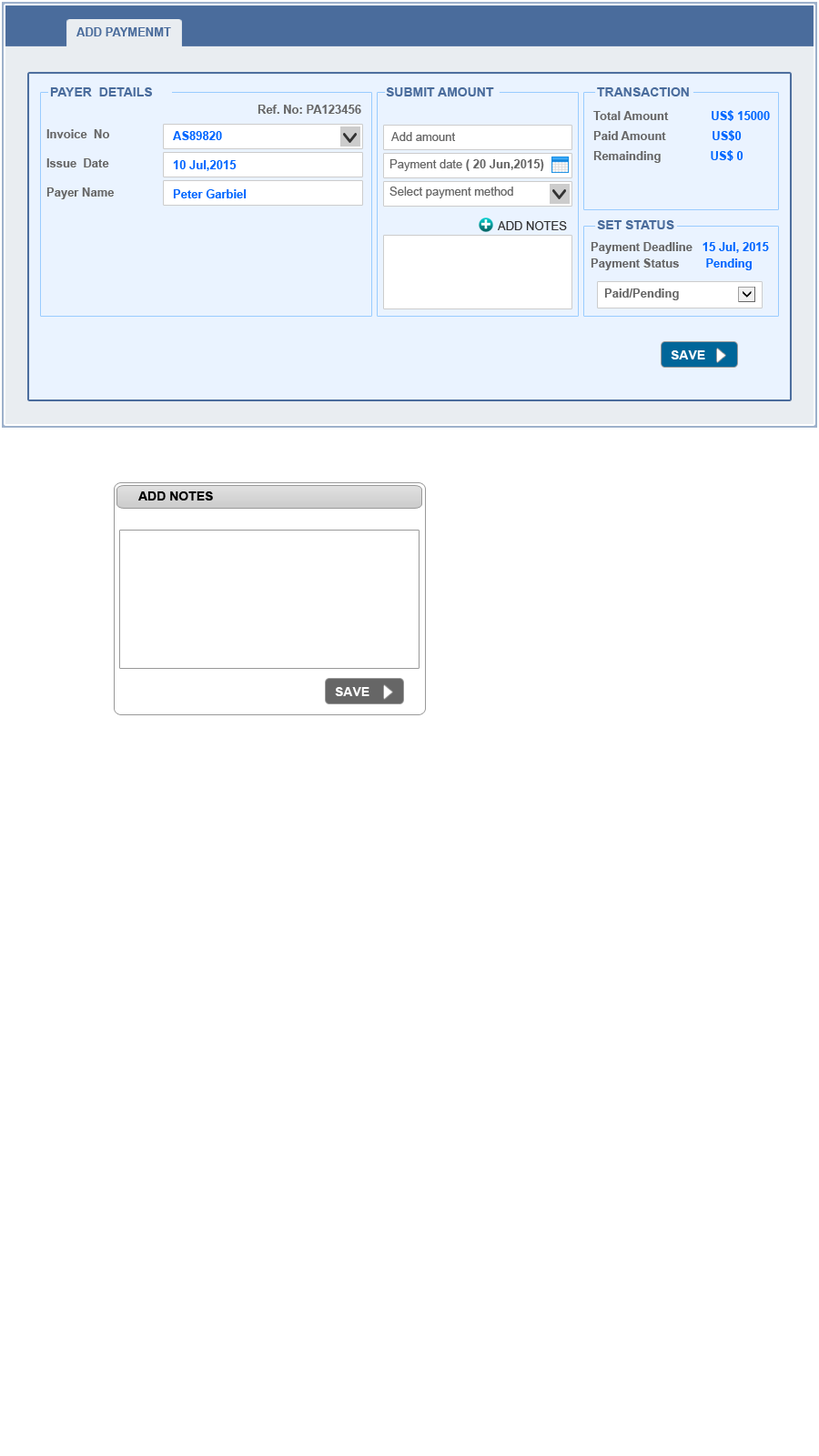
<style>
.page{position:relative;width:819px;height:1456px;background:#ffffff}
.page>*{position:absolute;margin:0}
.t1{font:11.8px "Arial-BoldMT";color:#4a6c9c}
.t2{font:12.7px "Arial-BoldMT";color:#4a6c9c}
.t3{font:11.8px "Arial-BoldMT";color:#666666}
.t4{font:11.8px/20px "Arial-BoldMT";color:#666666}
.t5{font:11.8px/20px "Arial-BoldMT";color:#0066ff}
.t6{font:11.8px/29.1px "Arial-BoldMT";color:#666666}
.t7{font:11.8px/23.7px "Arial-BoldMT";color:#666666}
.t8{font:11.8px/25.5px "Arial-BoldMT";color:#666666}
.t9{font:11.8px/29.1px "Arial-BoldMT";color:#0066ff}
.t10{font:11.8px "ArialMT";color:#666666}
.t11{font:11.8px "ArialMT";color:#333333}
.t12{font:11.8px/16.4px "Arial-BoldMT";color:#666666}
.t13{font:11.8px/16.4px "Arial-BoldMT";color:#0066ff}
.t14{font:12.7px "Arial-BoldMT";color:#ffffff}
.t15{font:12.7px "Arial-BoldMT";color:#000000}
</style>
<div class="page">
<p class="t1" style="left:76px;top:27px;width:95px;height:9px">ADD PAYMENMT</p>
<p class="t2" style="left:50px;top:87px;width:102px;height:9px">PAYER  DETAILS</p>
<p class="t2" style="left:386px;top:87px;width:108px;height:9px">SUBMIT AMOUNT</p>
<p class="t2" style="left:597px;top:87px;width:92px;height:9px">TRANSACTION</p>
<p class="t3" style="left:258px;top:105px;width:103px;height:9px">Ref. No: PA123456</p>
<p class="t4" style="left:593px;top:110px;width:177px;height:53px;text-align:justify">Total Amount             <span class="t5">US$ 15000 <br></span>Paid Amount              <span class="t5">US$0 <br></span>Remainding               <span class="t5">US$ 0</span></p>
<p class="t6" style="left:46px;top:129px;width:69px;height:70px;text-align:justify"><span class="t7"><br></span><span class="t8">Invoice  No  <br></span>Issue  Date<br>Payer Name</p>
<p class="t9" style="left:173px;top:131px;width:74px;height:67px;text-align:justify">AS89820<br>10 Jul,2015<br>Peter Garbiel</p>
<p class="t10" style="left:391px;top:132px;width:65px;height:9px">Add amount</p>
<p class="t3" style="left:389px;top:159px;width:155px;height:12px"><span class="t10">Payment date</span> ( 20 Jun,2015)</p>
<p class="t10" style="left:389px;top:187px;width:124px;height:11px">Select payment method</p>
<p class="t11" style="left:498px;top:221px;width:69px;height:9px">ADD NOTES</p>
<p class="t2" style="left:597px;top:220px;width:77px;height:9px">SET STATUS</p>
<p class="t12" style="left:591px;top:242px;width:178px;height:28px;text-align:justify">Payment Deadline   <span class="t13">15 Jul, 2015<br></span>Payment Status        <span class="t13">Pending</span></p>
<p class="t3" style="left:604px;top:288px;width:75px;height:12px">Paid/Pending</p>
<p class="t14" style="left:671px;top:350px;width:34px;height:9px">SAVE</p>
<p class="t15" style="left:138px;top:491px;width:75px;height:9px">ADD NOTES</p>
<p class="t14" style="left:335px;top:687px;width:34px;height:9px">SAVE</p>
</div>
